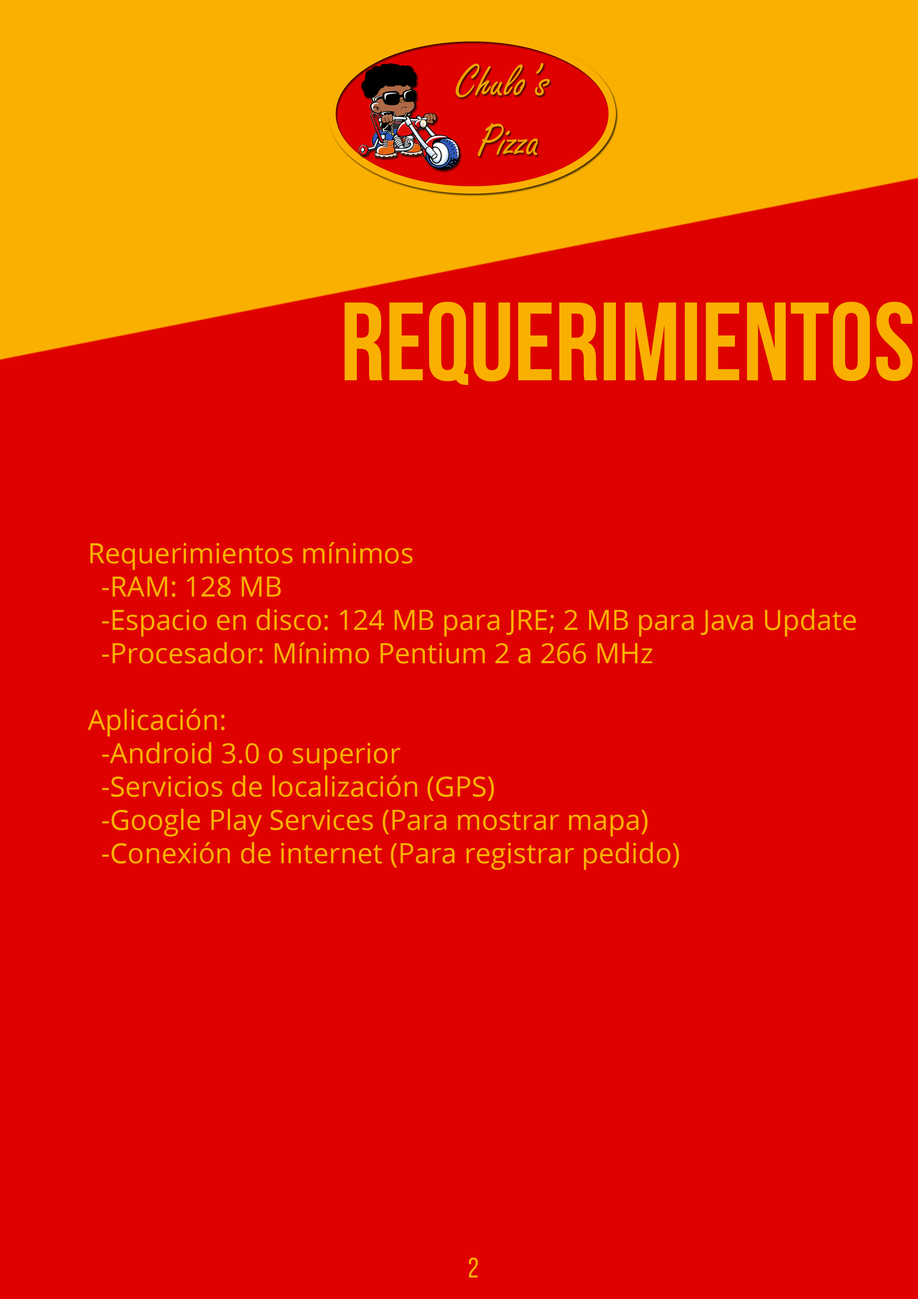
<style>
.page{position:relative;width:918px;height:1299px;background:#df0000}
.page>*{position:absolute;margin:0}
.t1{font:111.1px "BebasNeueBold";color:#fab000}
.t2{font:27.8px "OpenSans";color:#fab000}
.t3{font:27.8px "BebasNeueRegular";color:#fab000}
</style>
<div class="page">
<p class="t1" style="left:345px;top:302px;width:568px;height:83px">REQUERIMIENTOS</p>
<p class="t2" style="left:88px;top:542px;width:768px;height:328px">Requerimientos mínimos<br> -RAM: 128 MB<br> -Espacio en disco: 124 MB para JRE; 2 MB para Java Update<br> -Procesador: Mínimo Pentium 2 a 266 MHz<br> <br>Aplicación:<br> -Android 3.0 o superior<br> -Servicios de localización (GPS)<br> -Google Play Services (Para mostrar mapa)<br> -Conexión de internet (Para registrar pedido)</p>
<p class="t3" style="left:469px;top:1257px;width:9px;height:20px">2</p>
</div>
